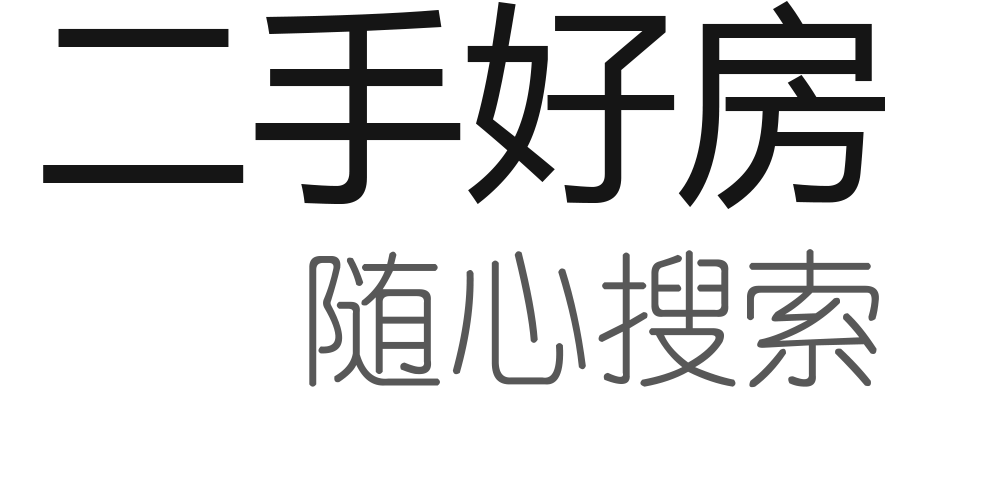
<style>
.page{position:relative;width:1000px;height:500px;background:#ffffff}
.page>*{position:absolute;margin:0}
.t1{font:213.3px "MicrosoftYaHei";color:#151515}
.t2{font:146.7px "YouYuan";color:#585858}
</style>
<div class="page">
<p class="t1" style="left:43px;top:0px;width:842px;height:209px">二手好房</p>
<p class="t2" style="left:309px;top:249px;width:570px;height:139px">随心搜索</p>
</div>
